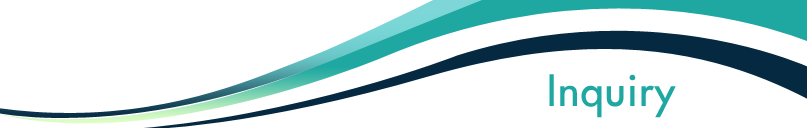
<style>
.page{position:relative;width:807px;height:128px;background:#ffffff}
.page>*{position:absolute;margin:0}
.t1{font:60px "PSLPrathomADBold";letter-spacing:0.025em;color:#1fa8a1}
</style>
<div class="page">
<p class="t1" style="left:549px;top:74px;width:127px;height:44px">Inquiry</p>
</div>
